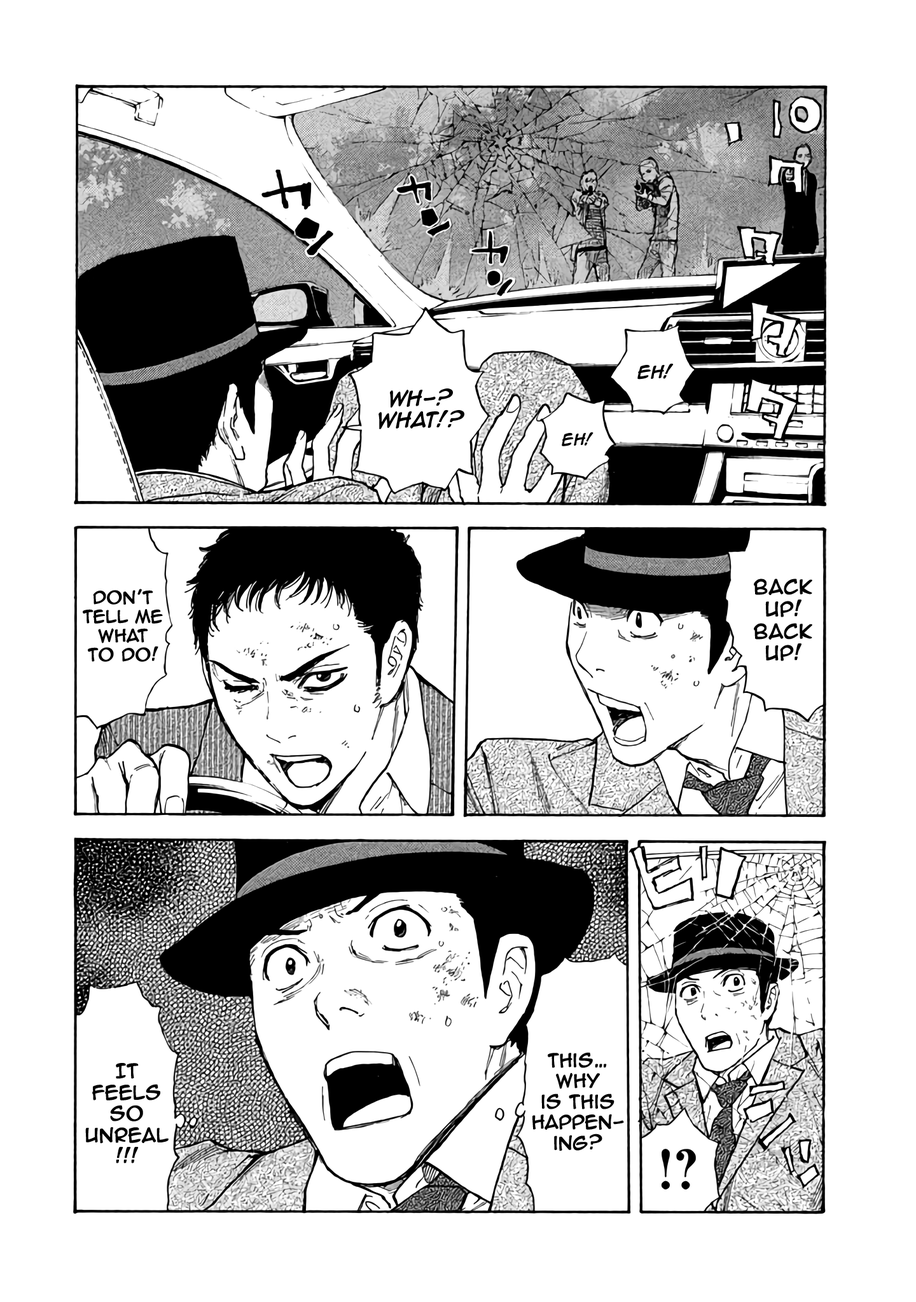
<style>
.page{position:relative;width:916px;height:1302px;background:#ffffff}
.page>*{position:absolute;margin:0}
.t1{font:15.3px "AnimeAce2.0BB-Bold";color:#000000}
.t2{font:17.8px "AnimeAce2.0BB-Bold";color:#000000}
.t3{font:13.4px "AnimeAce2.0BB-Bold";color:#000000}
.t4{font:18.4px "AnimeAce2.0BB";color:#000000;font-weight:bold}
.t5{font:15.9px "AnimeAce2.0BB";color:#000000;font-weight:bold}
.t6{font:17.2px "AnimeAce2.0BB";color:#000000;font-weight:bold}
.t7{font:17.8px "AnimeAce2.0BB";color:#000000;font-weight:bold}
</style>
<div class="page">
<p class="t1" style="left:637px;top:364px;width:36px;height:16px">EH!</p>
<p class="t2" style="left:378px;top:389px;width:86px;height:40px;text-align:center">WH-?<br>WHAT!?</p>
<p class="t3" style="left:561px;top:432px;width:32px;height:14px">EH!</p>
<p class="t4" style="left:754px;top:579px;width:58px;height:82px;text-align:center">Back<br>up!<br>Back<br>up!</p>
<p class="t5" style="left:83px;top:589px;width:80px;height:73px;text-align:center">Don’t<br>TEll me<br>what<br>to do!</p>
<p class="t6" style="left:532px;top:1052px;width:92px;height:100px;text-align:center">This…<br>Why<br>is this<br>happen-<br>ing?</p>
<p class="t7" style="left:85px;top:1063px;width:84px;height:101px;text-align:center">It<br>feels<br>so<br>unreal<br>!!!</p>
</div>
